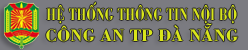
<style>
.page{position:relative;width:248px;height:50px;background:#7b7b81}
.page>*{position:absolute;margin:0}
.t1{font:17px "VNI-Bodon-Bold";color:#d8e51a;scale:0.72 1}
.t2{font:17px "VNI-Bodon-Bold";color:#d8e51a}
</style>
<div class="page">
<p class="t1" style="left:46px;top:2px;width:191px;height:22px">HEÄ THOÁNG THOÂNG TIN NOÄI BOÄ</p>
<p class="t2" style="left:46px;top:23px;width:192px;height:19px">COÂNG AN TP ÑAØ NAÜNG</p>
</div>
